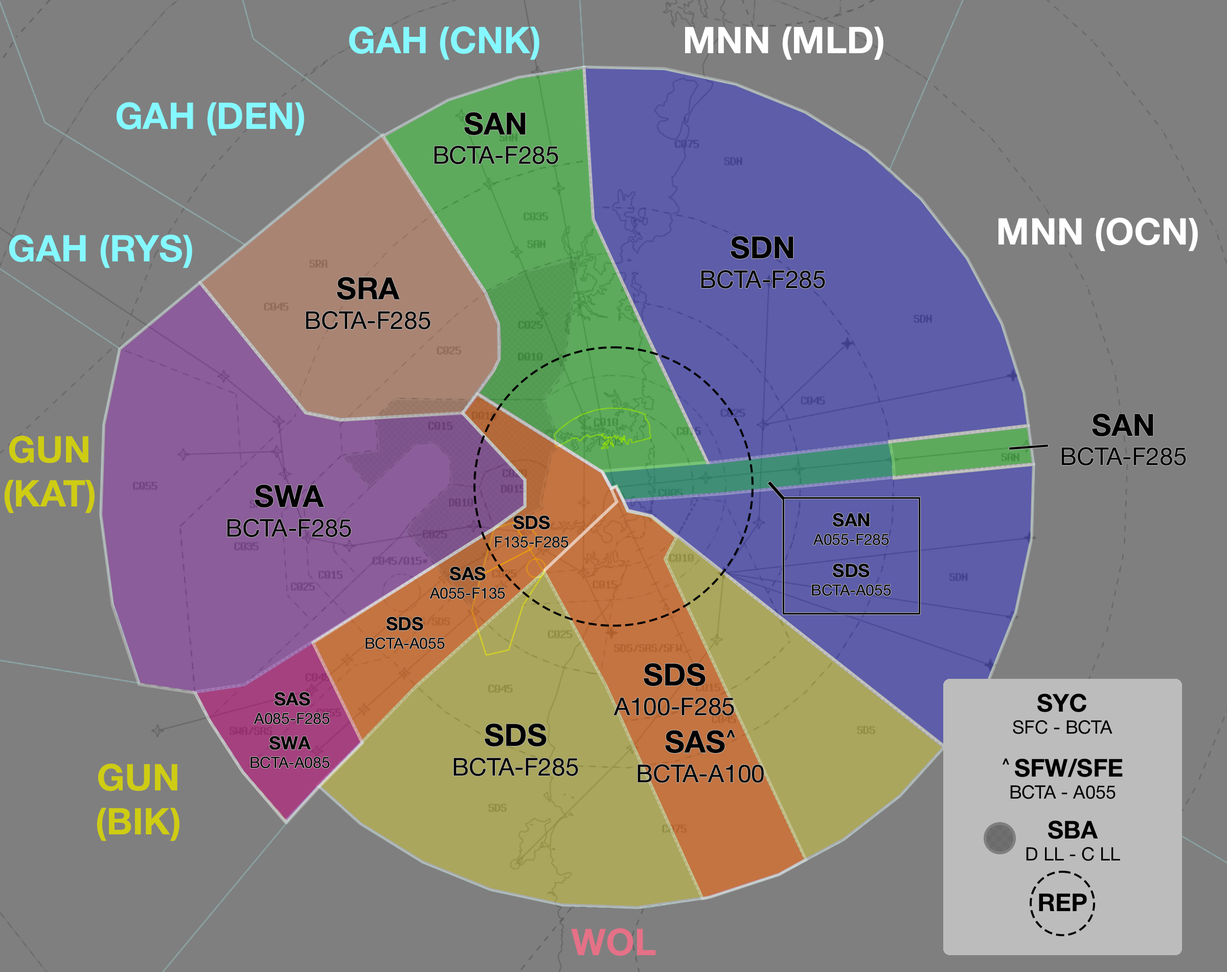
<style>
.page{position:relative;width:1227px;height:972px;background:#7f7f7f}
.page>*{position:absolute;margin:0}
.t1{font:36.8px "HelveticaNeue-Bold";color:#85f8ff}
.t2{font:36.8px "HelveticaNeue-Bold";color:#ffffff}
.t3{font:24.5px "HelveticaNeue-Roman";color:#000000}
.t4{font:30.7px "HelveticaNeue-Bold";color:#000000}
.t5{font:36.8px "HelveticaNeue-Bold";color:#cecc13}
.t6{font:15.3px "HelveticaNeue-Roman";color:#000000}
.t7{font:18.4px "HelveticaNeue-Bold";color:#000000}
.t8{font:18.4px "HelveticaNeue-Roman";color:#000000}
.t9{font:24.5px "HelveticaNeue-Bold";color:#000000}
.t10{font:36.8px "HelveticaNeue-Bold";color:#e57187}
</style>
<div class="page">
<p class="t1" style="left:349px;top:26px;width:190px;height:34px">GAH (CNK)</p>
<p class="t2" style="left:685px;top:27px;width:199px;height:33px">MNN (MLD)</p>
<p class="t1" style="left:117px;top:102px;width:187px;height:34px">GAH (DEN)</p>
<p class="t3" style="left:434px;top:112px;width:124px;height:52px;text-align:center"><span class="t4">SAN<br></span>BCTA-F285</p>
<p class="t2" style="left:999px;top:217px;width:199px;height:34px">MNN (OCN)</p>
<p class="t1" style="left:9px;top:234px;width:183px;height:34px">GAH (RYS)</p>
<p class="t3" style="left:701px;top:236px;width:124px;height:52px;text-align:center"><span class="t4">SDN<br></span>BCTA-F285</p>
<p class="t3" style="left:306px;top:277px;width:125px;height:52px;text-align:center"><span class="t4">SRA<br></span>BCTA-F285</p>
<p class="t3" style="left:1062px;top:413px;width:124px;height:52px;text-align:center"><span class="t4">SAN<br></span>BCTA-F285</p>
<p class="t5" style="left:4px;top:435px;width:91px;height:78px;text-align:center">GUN<br>(KAT)</p>
<p class="t3" style="left:227px;top:484px;width:124px;height:53px;text-align:center"><span class="t4">SWA<br></span>BCTA-F285</p>
<p class="t6" style="left:495px;top:515px;width:74px;height:33px;text-align:center"><span class="t7">SDS<br></span>F135-F285</p>
<p class="t6" style="left:814px;top:512px;width:75px;height:33px;text-align:center"><span class="t7">SAN<br></span>A055-F285</p>
<p class="t6" style="left:430px;top:566px;width:75px;height:33px;text-align:center"><span class="t7">SAS<br></span>A055-F135</p>
<p class="t6" style="left:812px;top:563px;width:79px;height:33px;text-align:center"><span class="t7">SDS<br></span>BCTA-A055</p>
<p class="t6" style="left:366px;top:616px;width:79px;height:33px;text-align:center"><span class="t7">SDS<br></span>BCTA-A055</p>
<p class="t3" style="left:614px;top:663px;width:120px;height:52px;text-align:center"><span class="t4">SDS<br></span>A100-F285</p>
<p class="t6" style="left:254px;top:691px;width:76px;height:33px;text-align:center"><span class="t7">SAS<br></span>A085-F285</p>
<p class="t8" style="left:1013px;top:693px;width:100px;height:41px;text-align:center"><span class="t9">SYC<br></span>SFC - BCTA</p>
<p class="t3" style="left:454px;top:723px;width:124px;height:53px;text-align:center"><span class="t4">SDS<br></span>BCTA-F285</p>
<p class="t6" style="left:251px;top:735px;width:79px;height:33px;text-align:center"><span class="t7">SWA<br></span>BCTA-A085</p>
<p class="t3" style="left:638px;top:729px;width:126px;height:53px;text-align:center"><span class="t4">SAS^<br></span>BCTA-A100</p>
<p class="t8" style="left:1002px;top:758px;width:121px;height:41px;text-align:center"><span class="t9">^ SFW/SFE<br></span>BCTA - A055</p>
<p class="t5" style="left:97px;top:763px;width:82px;height:78px;text-align:center">GUN<br>(BIK)</p>
<p class="t8" style="left:1026px;top:820px;width:94px;height:41px;text-align:center"><span class="t9">SBA<br></span>D LL - C LL</p>
<p class="t9" style="left:1039px;top:893px;width:48px;height:18px">REP</p>
<p class="t10" style="left:571px;top:928px;width:85px;height:28px">WOL</p>
</div>
